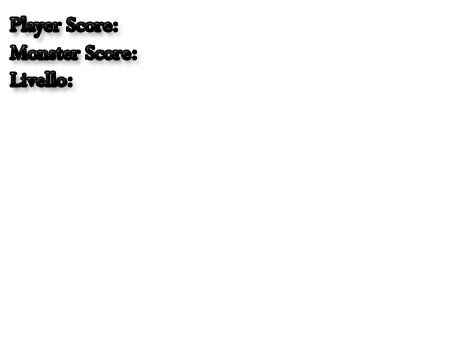
<style>
.page{position:relative;width:454px;height:340px;background:#ffffff}
.page>*{position:absolute;margin:0}
.t1{font:23px "Perpetua"}
</style>
<div class="page">
<p class="t1" style="left:10px;top:17px;width:126px;height:69px">Player Score:<br>Monster Score:<br>Livello:</p>
</div>
